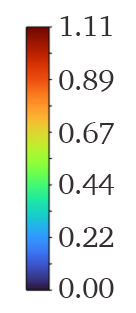
<style>
.page{position:relative;width:136px;height:313px;background:#ffffff}
.page>*{position:absolute;margin:0}
.t1{font:30px "Charter-Roman";letter-spacing:-0.02em;color:#352e31}
</style>
<div class="page">
<p class="t1" style="left:60px;top:16px;width:52px;height:20px">1.11</p>
<p class="t1" style="left:59px;top:70px;width:55px;height:22px">0.89</p>
<p class="t1" style="left:59px;top:122px;width:55px;height:22px">0.67</p>
<p class="t1" style="left:59px;top:174px;width:56px;height:21px">0.44</p>
<p class="t1" style="left:59px;top:227px;width:55px;height:20px">0.22</p>
<p class="t1" style="left:59px;top:278px;width:55px;height:20px">0.00</p>
</div>
